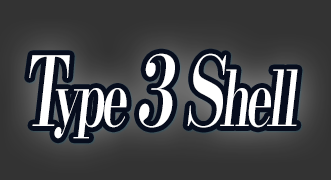
<style>
.page{position:relative;width:331px;height:180px;background:#333333}
.page>*{position:absolute;margin:0}
.t1{font:76.8px "KochoStd-Heavy";letter-spacing:-0.08em;color:#ffffff;font-style:italic;scale:0.62 1}
.t2{font:96px "KochoStd-Heavy";letter-spacing:-0.08em;color:#ffffff;font-style:italic;scale:0.62 1}
</style>
<div class="page">
<p class="t1" style="left:29px;top:53px;width:269px;height:86px"><span class="t2">T</span>ype <span class="t2">3 S</span>hell</p>
</div>
